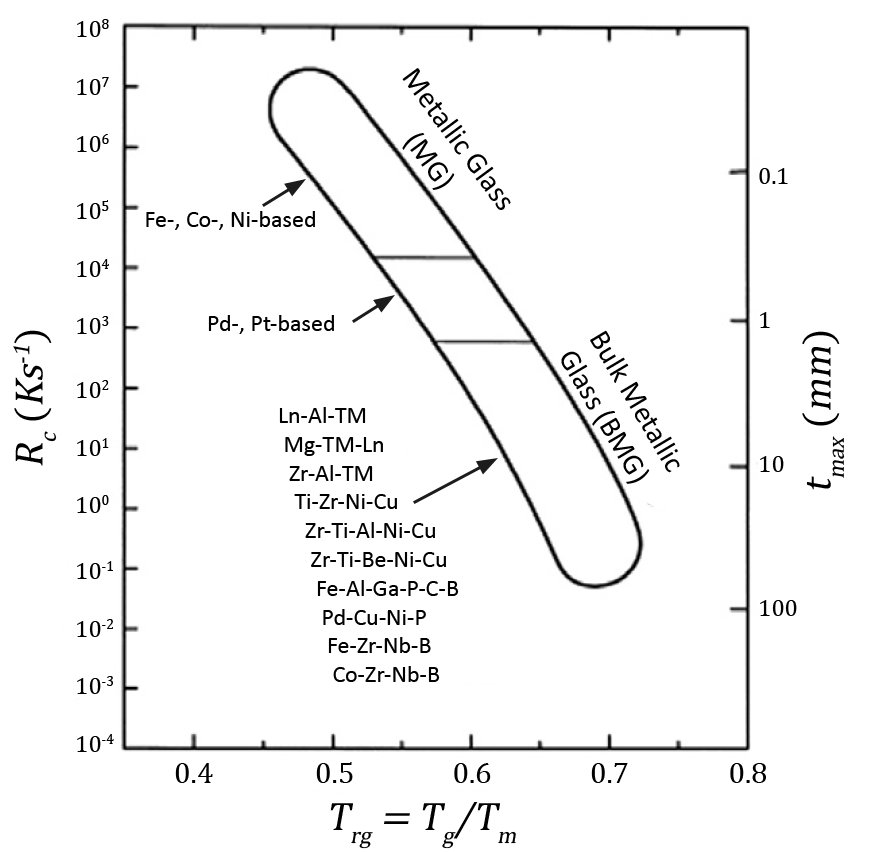
<style>
.page{position:relative;width:871px;height:852px;background:#ffffff}
.page>*{position:absolute;margin:0}
.t1{font:24px "CambriaMath";color:#000000}
.t2{font:30px "Calibri";color:#000000}
.t3{font:24px "Calibri";color:#000000}
.t4{font:40px "CambriaMath";color:#000000;font-style:italic}
.t5{font:40px "CambriaMath";color:#000000}
.t6{font:30px "CambriaMath";color:#000000}
</style>
<div class="page">
<p class="t1" style="left:77px;top:19px;width:32px;height:133px">108<br><br>107<br><br>106</p>
<p class="t2" style="left:402px;top:68px;width:109px;height:142px;rotate:54deg">Metallic Glass (MG)</p>
<p class="t1" style="left:759px;top:168px;width:38px;height:448px">0.1<br><br><br><br><br>1<br><br><br><br><br>10<br><br><br><br><br>100</p>
<p class="t1" style="left:77px;top:200px;width:32px;height:134px">105<br><br>104<br><br>103</p>
<p class="t3" style="left:146px;top:211px;width:169px;height:19px">Fe-, Co-, Ni-based</p>
<p class="t3" style="left:208px;top:315px;width:126px;height:19px">Pd-, Pt-based</p>
<p class="t4" style="left:13px;top:330px;width:44px;height:136px;rotate:-90deg">Rc<span class="t5"> (</span>Ks-1<span class="t5">)</span></p>
<p class="t2" style="left:561px;top:330px;width:119px;height:154px;rotate:59deg">Bulk Metallic Glass (BMG)</p>
<p class="t4" style="left:802px;top:331px;width:43px;height:159px;rotate:-90deg">tmax<span class="t5"> (</span>mm<span class="t5">)</span></p>
<p class="t1" style="left:77px;top:380px;width:32px;height:133px">102<br><br>101<br><br>100</p>
<p class="t3" style="left:279px;top:407px;width:180px;height:275px">Ln-Al-TM<br> Mg-TM-Ln<br>  Zr-Al-TM<br>   Ti-Zr-Ni-Cu<br>     Zr-Ti-Al-Ni-Cu<br>      Zr-Ti-Be-Ni-Cu<br>       Fe-Al-Ga-P-C-B<br>        Pd-Cu-Ni-P<br>         Fe-Zr-Nb-B<br>          Co-Zr-Nb-B</p>
<p class="t1" style="left:77px;top:561px;width:37px;height:191px">10-1<br><br>10-2<br><br>10-3<br><br>10-4</p>
<p class="t6" style="left:175px;top:762px;width:591px;height:21px">0.4       0.5      0.6      0.7               0.8</p>
<p class="t4" style="left:330px;top:802px;width:186px;height:47px">Trg = Tg/Tm</p>
</div>
